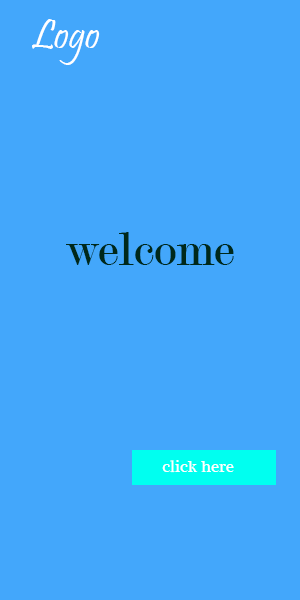
<style>
.page{position:relative;width:300px;height:600px;background:#43a7fb}
.page>*{position:absolute;margin:0}
.t1{font:41.7px "Pristina-Regular";color:#ffffff}
.t2{font:50px "Modern-Regular";color:#00291b}
.t3{font:16.7px "PlantagenetCherokee";color:#ffffff}
</style>
<div class="page">
<p class="t1" style="left:32px;top:19px;width:68px;height:46px">Logo</p>
<p class="t2" style="left:66px;top:232px;width:168px;height:33px">welcome</p>
<p class="t3" style="left:162px;top:460px;width:72px;height:13px">click here</p>
</div>
